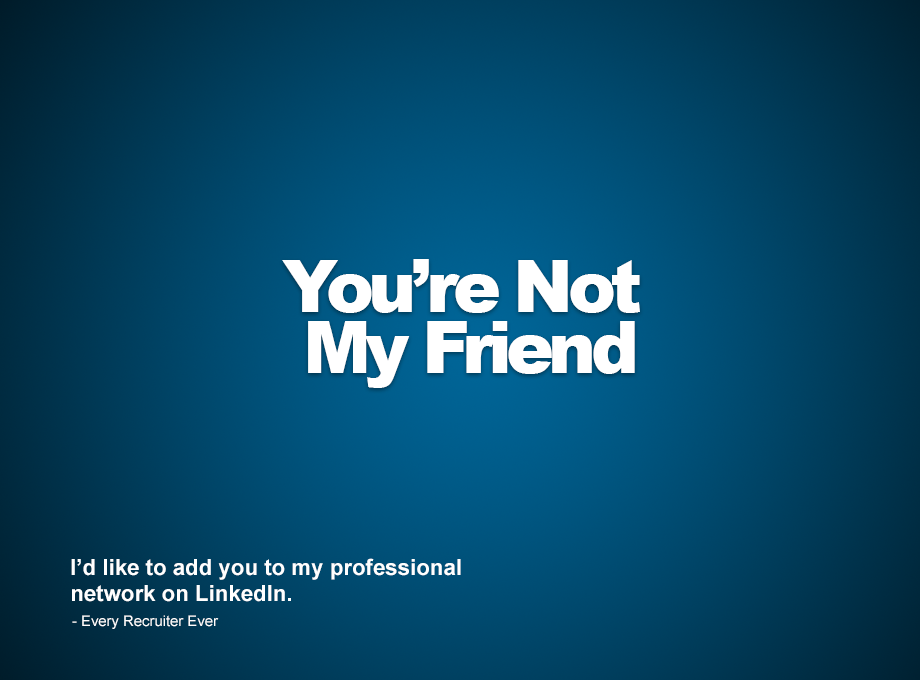
<style>
.page{position:relative;width:920px;height:680px}
.page>*{position:absolute;margin:0}
.t1{font:72px/61px "Arial-Black";letter-spacing:-0.08em;color:#ffffff}
.t2{font:22.2px "Arial-BoldMT";color:#ffffff}
.t3{font:14.8px "ArialMT";color:#ffffff}
</style>
<div class="page">
<p class="t1" style="left:282px;top:259px;width:358px;height:129px;text-align:center">You’re Not <br>My Friend</p>
<p class="t2" style="left:71px;top:558px;width:390px;height:44px">I’d like to add you to my professional <br>network on LinkedIn.</p>
<p class="t3" style="left:72px;top:615px;width:147px;height:14px">- Every Recruiter Ever</p>
</div>
